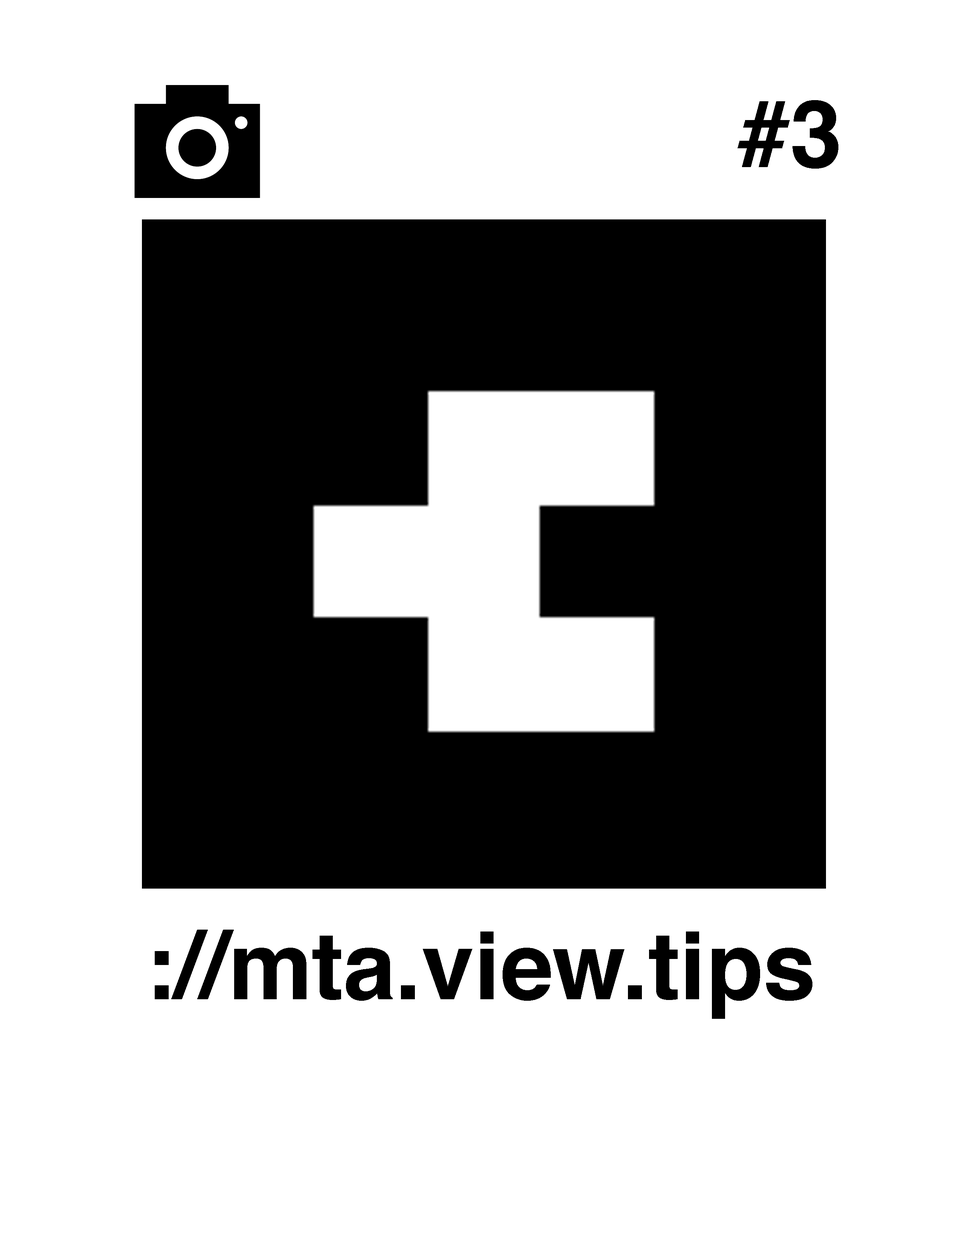
<style>
.page{position:relative;width:960px;height:1242px;background:#ffffff}
.page>*{position:absolute;margin:0}
.t1{font:94.1px "Helvetica-Bold";color:#000000}
</style>
<div class="page">
<p class="t1" style="left:737px;top:100px;width:101px;height:69px">#3</p>
<p class="t1" style="left:155px;top:930px;width:657px;height:89px">://mta.view.tips</p>
</div>
